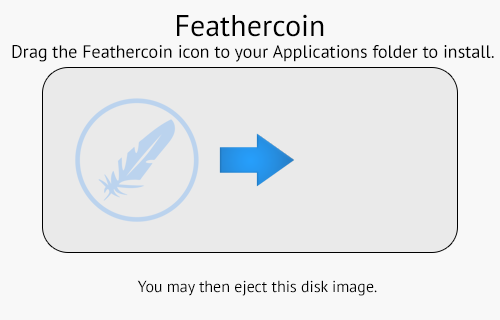
<style>
.page{position:relative;width:500px;height:320px;background:#f8f8f8}
.page>*{position:absolute;margin:0}
.t1{font:30px "PTSans-Regular";color:#000000}
.t2{font:18px "PTSans-Regular";color:#000000}
.t3{font:16px "PTSans-Regular";color:#000000}
</style>
<div class="page">
<p class="t1" style="left:177px;top:14px;width:147px;height:23px">Feathercoin</p>
<p class="t2" style="left:12px;top:45px;width:482px;height:17px">Drag the Feathercoin icon to your Applications folder to install.</p>
<p class="t3" style="left:137px;top:280px;width:240px;height:16px">You may then eject this disk image.</p>
</div>
